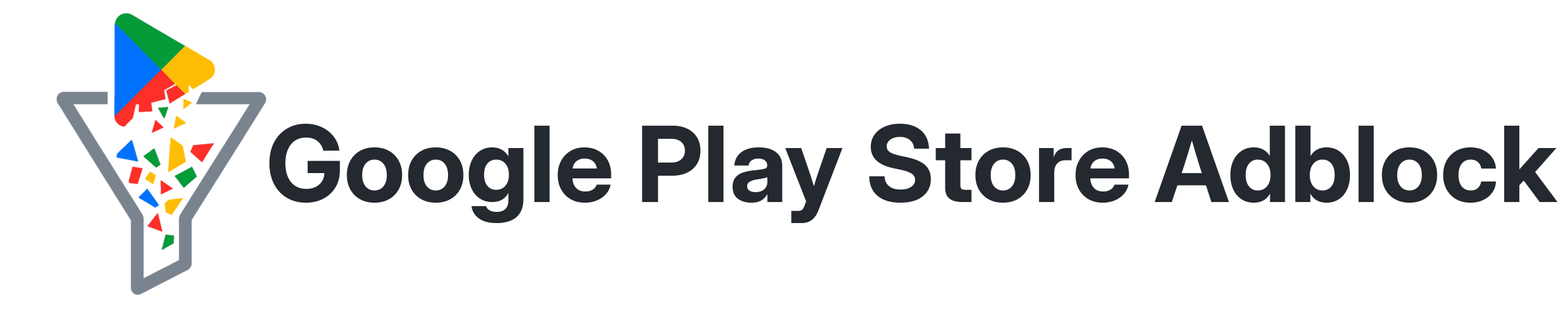
<style>
.page{position:relative;width:1568px;height:329px;background:#ffffff}
.page>*{position:absolute;margin:0}
.t1{font:104.9px "InterDisplay-Bold";color:#24292f}
</style>
<div class="page">
<p class="t1" style="left:269px;top:124px;width:1289px;height:99px">Google Play Store Adblock</p>
</div>
